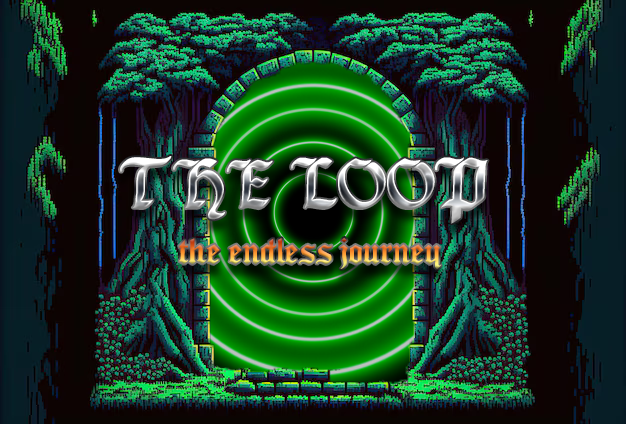
<style>
.page{position:relative;width:626px;height:424px}
.page>*{position:absolute;margin:0}
.t1{font:59.5px "Seagramtfb"}
.t2{font:33px "Seagramtfb"}
</style>
<div class="page">
<p class="t1" style="left:120px;top:156px;width:368px;height:68px">THE LOOP</p>
<p class="t2" style="left:179px;top:237px;width:262px;height:32px">the endless journey</p>
</div>
